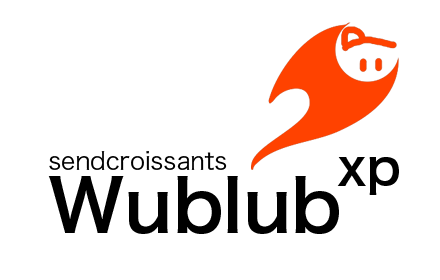
<style>
.page{position:relative;width:440px;height:280px;background:#ffffff}
.page>*{position:absolute;margin:0}
.t1{font:24px "HiraKakuPro-W3";color:#000000}
.t2{font:48px "HiraKakuPro-W6";color:#000000}
.t3{font:72px "HiraKakuPro-W6";color:#000000}
</style>
<div class="page">
<p class="t1" style="left:49px;top:151px;width:178px;height:19px">sendcroissants</p>
<p class="t2" style="left:337px;top:157px;width:62px;height:38px">xp</p>
<p class="t3" style="left:48px;top:176px;width:291px;height:58px">Wublub</p>
</div>
